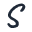
<style>
.page{position:relative;width:32px;height:32px;background:#ffffff}
.page>*{position:absolute;margin:0}
.t1{font:32px "Caveat-Bold";color:#1f2937}
</style>
<div class="page">
<p class="t1" style="left:7px;top:3px;width:19px;height:25px">S</p>
</div>
